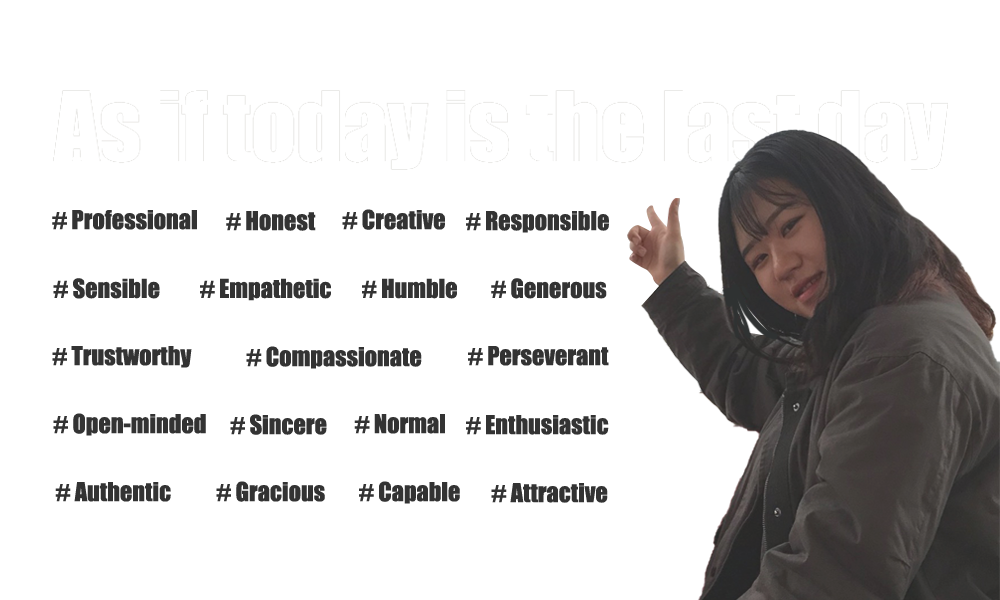
<style>
.page{position:relative;width:1000px;height:600px;background:#ffffff}
.page>*{position:absolute;margin:0}
.t1{font:24.3px "Impact";color:#333333}
</style>
<div class="page">
<p class="t1" style="left:342px;top:209px;width:103px;height:21px"># Creative</p>
<p class="t1" style="left:52px;top:210px;width:145px;height:20px"># Professional</p>
<p class="t1" style="left:226px;top:211px;width:90px;height:20px"># Honest</p>
<p class="t1" style="left:466px;top:211px;width:143px;height:22px"># Responsible</p>
<p class="t1" style="left:53px;top:278px;width:107px;height:21px"># Sensible</p>
<p class="t1" style="left:200px;top:278px;width:131px;height:23px"># Empathetic</p>
<p class="t1" style="left:362px;top:278px;width:95px;height:21px"># Humble</p>
<p class="t1" style="left:491px;top:278px;width:116px;height:21px"># Generous</p>
<p class="t1" style="left:52px;top:346px;width:140px;height:22px"># Trustworthy</p>
<p class="t1" style="left:246px;top:346px;width:176px;height:23px"># Compassionate</p>
<p class="t1" style="left:468px;top:346px;width:141px;height:20px"># Perseverant</p>
<p class="t1" style="left:53px;top:413px;width:153px;height:23px"># Open-minded</p>
<p class="t1" style="left:230px;top:414px;width:97px;height:21px"># Sincere</p>
<p class="t1" style="left:354px;top:414px;width:91px;height:20px"># Normal</p>
<p class="t1" style="left:466px;top:415px;width:143px;height:20px"># Enthusiastic</p>
<p class="t1" style="left:55px;top:482px;width:116px;height:20px"># Authentic</p>
<p class="t1" style="left:216px;top:481px;width:109px;height:21px"># Gracious</p>
<p class="t1" style="left:359px;top:481px;width:101px;height:23px"># Capable</p>
<p class="t1" style="left:491px;top:483px;width:117px;height:20px"># Attractive</p>
</div>
